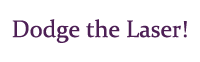
<style>
.page{position:relative;width:200px;height:62px;background:#ffffff}
.page>*{position:absolute;margin:0}
.t1{font:24px "Constantia";color:#4e2056}
</style>
<div class="page">
<p class="t1" style="left:12px;top:19px;width:175px;height:24px">Dodge the Laser!</p>
</div>
